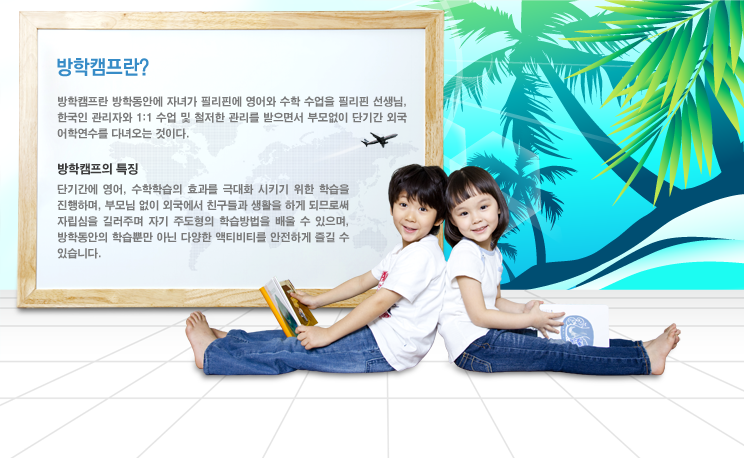
<style>
.page{position:relative;width:744px;height:458px}
.page>*{position:absolute;margin:0}
.t1{font:20px "YGO550";letter-spacing:-0.025em;color:#378cc7;scale:0.95 1}
.t2{font:11px/16px "H2gtrE";letter-spacing:-0.025em;color:#797979;scale:0.95 1}
.t3{font:12px/4px "H2gtrE";letter-spacing:-0.025em;color:#3b3b3b;scale:0.95 1}
</style>
<div class="page">
<p class="t1" style="left:57px;top:58px;width:92px;height:19px">방학캠프란?</p>
<p class="t2" style="left:57px;top:96px;width:350px;height:43px;text-align:justify">방학캠프란 방학동안에 자녀가 필리핀에 영어와 수학 수업을 필리핀 선생님, 한국인 관리자와 1:1 수업 및 철저한 관리를 받으면서 부모없이 단기간 외국 어학연수를 다녀오는 것이다.</p>
<p class="t2" style="left:57px;top:163px;width:293px;height:96px;text-align:justify"><span class="t3">방학캠프의 특징<br><br></span>단기간에 영어, 수학학습의 효과를 극대화 시키기 위한 학습을 진행하며, 부모님 없이 외국에서 친구들과 생활을 하게 되므로써 자립심을 길러주며 자기 주도형의 학습방법을 배울 수 있으며, 방학동안의 학습뿐만 아닌 다양한 액티비티를 안전하게 즐길 수 있습니다.</p>
</div>
